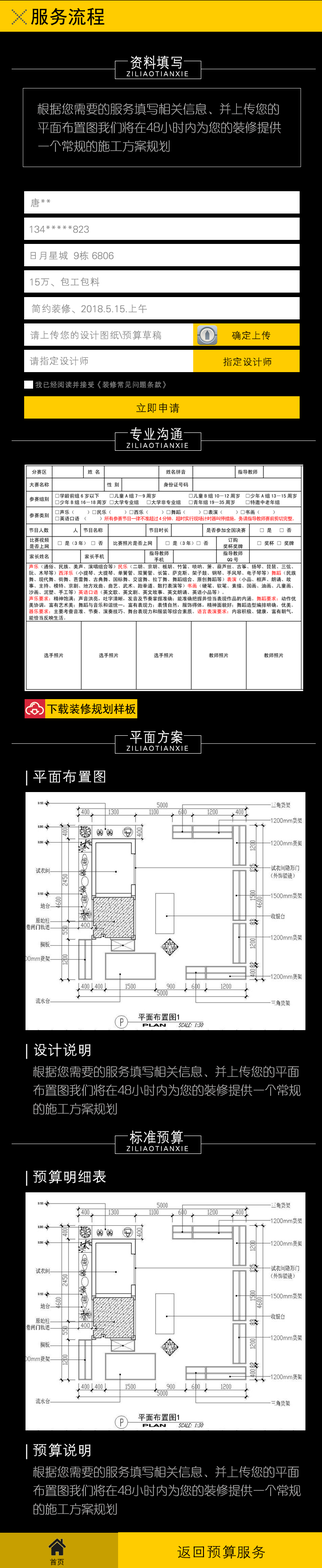
<style>
.page{position:relative;width:322px;height:1568px;background:#000000}
.page>*{position:absolute;margin:0}
.t1{font:18.6px "SimHei";color:#000000}
.t2{font:15.1px "FZXH1JW--GB1-0";color:#ffffff;scale:0.9 1}
.t3{font:6.5px "FZXH1JW--GB1-0";letter-spacing:0.2em;color:#ffffff}
.t4{font:12.1px/18.6px "FZXQJW--GB1-0";color:#b9b8b8}
.t5{font:9.9px "FZXH1JW--GB1-0";color:#8b8b8b}
.t6{font:9.9px "FZXH1JW--GB1-0";color:#000000}
.t7{font:7.4px "FZXH1JW--GB1-0";color:#8b8b8b}
.t8{font:11.2px "FZXH1JW--GB1-0";color:#000000}
.t9{font:11.2px "SimHei";color:#000000}
.t10{font:14.9px "FZXH1JW--GB1-0";color:#ffffff}
.t11{font:14.9px "FZXH1JW--GB1-0";color:#040000}
.t12{font:7.3px "SimHei";color:#000000}
</style>
<div class="page">
<p class="t1" style="left:31px;top:8px;width:74px;height:17px">服务流程</p>
<p class="t2" style="left:130px;top:55px;width:52px;height:14px">资料填写</p>
<p class="t3" style="left:126px;top:71px;width:62px;height:5px">ZILIAOTIANXIE</p>
<p class="t4" style="left:38px;top:103px;width:243px;height:49px">根据您需要的服务填写相关信息、并上传您的<br>平面布置图我们将在48小时内为您的装修提供<br>一个常规的施工方案规划</p>
<p class="t5" style="left:30px;top:198px;width:20px;height:9px">唐**</p>
<p class="t5" style="left:29px;top:225px;width:60px;height:8px">134*****823</p>
<p class="t5" style="left:30px;top:251px;width:83px;height:9px">日月星城  9栋 6806</p>
<p class="t5" style="left:30px;top:277px;width:69px;height:10px">15万、包工包料</p>
<p class="t5" style="left:32px;top:304px;width:115px;height:10px">简约装修、2018.5.15.上午</p>
<p class="t5" style="left:30px;top:331px;width:131px;height:9px">请上传您的设计图纸\预算草稿</p>
<p class="t6" style="left:231px;top:331px;width:39px;height:9px">确定上传</p>
<p class="t5" style="left:29px;top:356px;width:59px;height:9px">请指定设计师</p>
<p class="t6" style="left:223px;top:357px;width:48px;height:9px">指定设计师</p>
<p class="t7" style="left:35px;top:381px;width:131px;height:8px">我已经阅读并接受《装修常见问题条款》</p>
<p class="t8" style="left:136px;top:403px;width:43px;height:10px">立即申请</p>
<p class="t2" style="left:130px;top:427px;width:53px;height:14px">专业沟通</p>
<p class="t3" style="left:126px;top:443px;width:62px;height:5px">ZILIAOTIANXIE</p>
<p class="t9" style="left:47px;top:704px;width:88px;height:10px">下载装修规划样板</p>
<p class="t2" style="left:130px;top:730px;width:52px;height:14px">平面方案</p>
<p class="t3" style="left:126px;top:746px;width:62px;height:5px">ZILIAOTIANXIE</p>
<p class="t10" style="left:26px;top:770px;width:79px;height:16px">| 平面布置图</p>
<p class="t10" style="left:26px;top:1043px;width:64px;height:16px">| 设计说明</p>
<p class="t4" style="left:33px;top:1066px;width:268px;height:49px">根据您需要的服务填写相关信息、并上传您的平面<br>布置图我们将在48小时内为您的装修提供一个常规<br>的施工方案规划</p>
<p class="t2" style="left:130px;top:1130px;width:53px;height:14px">标准预算</p>
<p class="t3" style="left:126px;top:1146px;width:62px;height:5px">ZILIAOTIANXIE</p>
<p class="t10" style="left:26px;top:1170px;width:80px;height:16px">| 预算明细表</p>
<p class="t10" style="left:26px;top:1443px;width:64px;height:16px">| 预算说明</p>
<p class="t4" style="left:33px;top:1466px;width:268px;height:49px">根据您需要的服务填写相关信息、并上传您的平面<br>布置图我们将在48小时内为您的装修提供一个常规<br>的施工方案规划</p>
<p class="t11" style="left:177px;top:1545px;width:88px;height:14px">返回预算服务</p>
<p class="t12" style="left:50px;top:1559px;width:14px;height:6px">首页</p>
</div>
